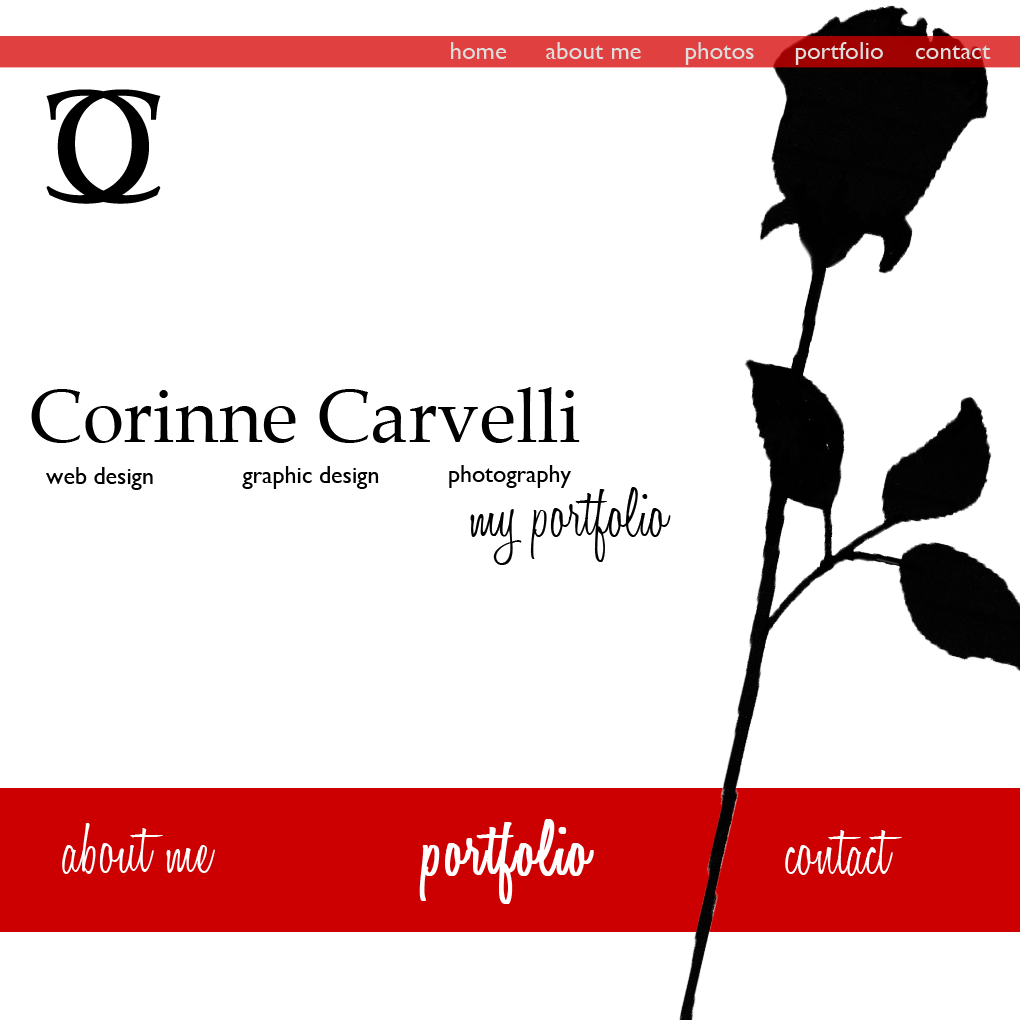
<style>
.page{position:relative;width:1020px;height:1020px;background:#ffffff}
.page>*{position:absolute;margin:0}
.t1{font:25px "GillSans";color:#dfdcdc}
.t2{font:75px "Palatino-Roman";color:#000000}
.t3{font:24px "GillSans";color:#000000}
.t4{font:72px "HoneyScript-Light";color:#000000}
.t5{font:80px "HoneyScript-Light";color:#ffffff;font-weight:bold}
.t6{font:75px "HoneyScript-Light";color:#ffffff}
</style>
<div class="page">
<p class="t1" style="left:451px;top:42px;width:56px;height:17px">home</p>
<p class="t1" style="left:546px;top:42px;width:95px;height:17px">about me</p>
<p class="t1" style="left:685px;top:42px;width:69px;height:23px">photos</p>
<p class="t1" style="left:795px;top:42px;width:88px;height:23px">portfolio</p>
<p class="t1" style="left:916px;top:45px;width:75px;height:14px">contact</p>
<p class="t2" style="left:31px;top:387px;width:549px;height:56px">Corinne Carvelli</p>
<p class="t3" style="left:46px;top:467px;width:107px;height:23px">web design</p>
<p class="t3" style="left:242px;top:466px;width:137px;height:23px">graphic design</p>
<p class="t3" style="left:449px;top:465px;width:122px;height:23px">photography</p>
<p class="t4" style="left:470px;top:487px;width:201px;height:78px">my portfolio</p>
<p class="t5" style="left:419px;top:819px;width:175px;height:85px">portfolio</p>
<p class="t6" style="left:62px;top:823px;width:153px;height:51px">about me</p>
<p class="t6" style="left:785px;top:830px;width:117px;height:46px">contact</p>
</div>
